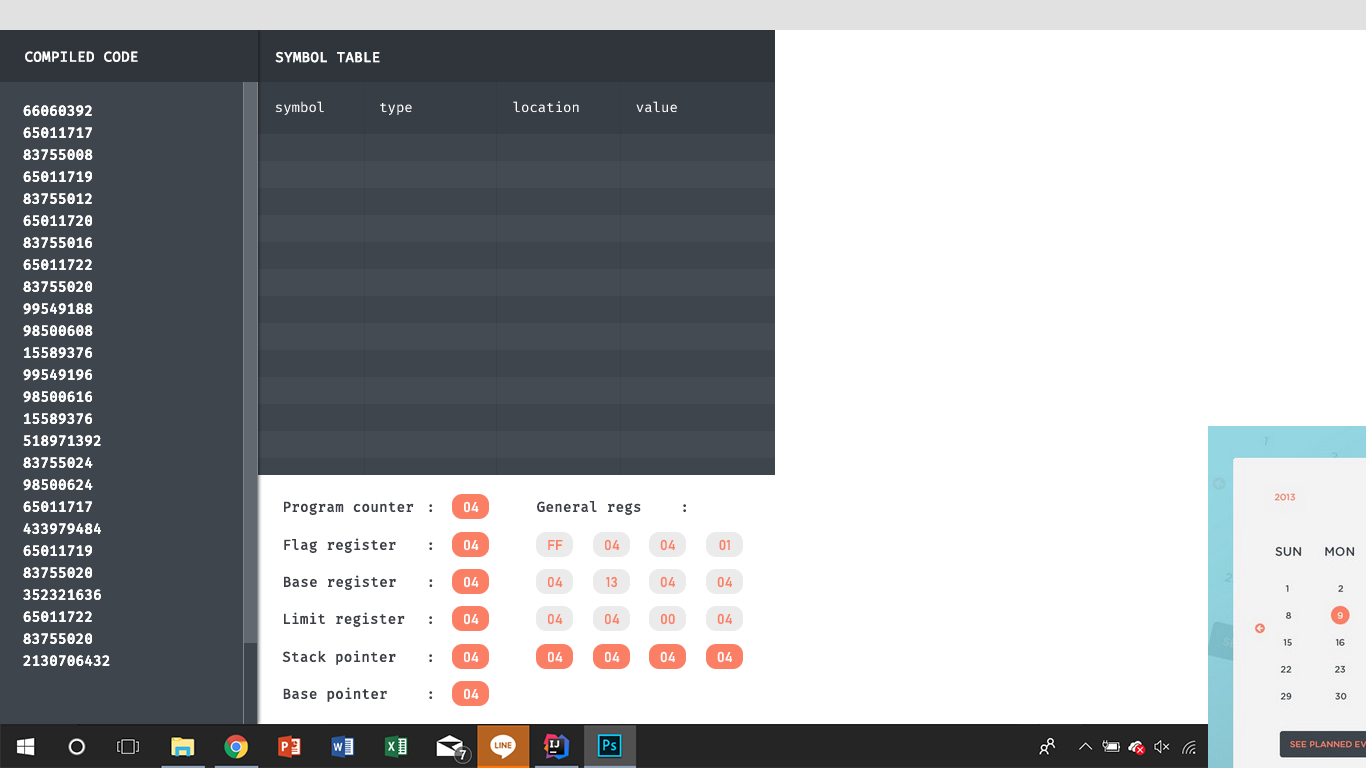
<style>
.page{position:relative;width:1366px;height:768px;background:#ffffff}
.page>*{position:absolute;margin:0}
.t1{font:14px "FiraMono-Regular";color:#ffffff;font-weight:bold}
.t2{font:14px "FiraMono-Regular";color:#fbfbfb}
.t3{font:14px "FiraMono-Regular";color:#383e45}
.t4{font:14px/22px "FiraMono-Regular";color:#ffffff;font-weight:bold}
.t5{font:14px "FiraMono-Regular";color:#3c3f46;font-weight:bold}
.t6{font:14px "Bahnschrift";color:#ffffff;font-weight:bold}
.t7{font:14px "Bahnschrift";color:#fb7f65;font-weight:bold}
.t8{font:14px "Bahnschrift";color:#fbfbfb;font-weight:bold}
</style>
<div class="page">
<p class="t1" style="left:25px;top:51px;width:113px;height:11px">COMPILED CODE</p>
<p class="t1" style="left:275px;top:51px;width:105px;height:12px">SYMBOL TABLE</p>
<p class="t2" style="left:275px;top:101px;width:49px;height:14px">symbol</p>
<p class="t2" style="left:380px;top:101px;width:40px;height:14px">type<span class="t3">l</span></p>
<p class="t2" style="left:513px;top:101px;width:75px;height:14px">location<span class="t3">y</span></p>
<p class="t2" style="left:636px;top:101px;width:50px;height:14px">value<span class="t3">y</span></p>
<p class="t4" style="left:23px;top:105px;width:87px;height:561px">66060392<br>65011717<br>83755008<br>65011719<br>83755012<br>65011720<br>83755016<br>65011722<br>83755020<br>99549188<br>98500608<br>15589376<br>99549196<br>98500616<br>15589376<br>518971392<br>83755024<br>98500624<br>65011717<br>433979484<br>65011719<br>83755020<br>352321636<br>65011722<br>83755020<br>2130706432</p>
<p class="t4" style="left:23px;top:105px;width:87px;height:561px">66060392<br>65011717<br>83755008<br>65011719<br>83755012<br>65011720<br>83755016<br>65011722<br>83755020<br>99549188<br>98500608<br>15589376<br>99549196<br>98500616<br>15589376<br>518971392<br>83755024<br>98500624<br>65011717<br>433979484<br>65011719<br>83755020<br>352321636<br>65011722<br>83755020<br>2130706432</p>
<p class="t5" style="left:284px;top:501px;width:149px;height:14px">Program counter :</p>
<p class="t6" style="left:464px;top:501px;width:15px;height:12px">04</p>
<p class="t5" style="left:537px;top:501px;width:149px;height:14px">General regs  :</p>
<p class="t5" style="left:284px;top:538px;width:149px;height:15px">Flag register :</p>
<p class="t6" style="left:464px;top:539px;width:15px;height:12px">04</p>
<p class="t7" style="left:548px;top:540px;width:15px;height:10px">FF</p>
<p class="t7" style="left:605px;top:539px;width:15px;height:12px">04</p>
<p class="t7" style="left:660px;top:539px;width:15px;height:12px">04</p>
<p class="t7" style="left:719px;top:539px;width:11px;height:12px">01</p>
<p class="t5" style="left:284px;top:575px;width:149px;height:15px">Base register :</p>
<p class="t6" style="left:464px;top:576px;width:15px;height:12px">04</p>
<p class="t7" style="left:548px;top:576px;width:15px;height:12px">04</p>
<p class="t7" style="left:606px;top:576px;width:11px;height:12px">13</p>
<p class="t7" style="left:660px;top:576px;width:15px;height:12px">04</p>
<p class="t7" style="left:717px;top:576px;width:15px;height:12px">04</p>
<p class="t5" style="left:284px;top:612px;width:148px;height:15px">Limit register :</p>
<p class="t6" style="left:464px;top:613px;width:15px;height:12px">04</p>
<p class="t7" style="left:548px;top:613px;width:15px;height:12px">04</p>
<p class="t7" style="left:605px;top:613px;width:15px;height:12px">04</p>
<p class="t7" style="left:661px;top:613px;width:14px;height:12px">00</p>
<p class="t7" style="left:717px;top:613px;width:15px;height:12px">04</p>
<p class="t5" style="left:282px;top:650px;width:150px;height:15px">Stack pointer :</p>
<p class="t6" style="left:464px;top:651px;width:15px;height:12px">04</p>
<p class="t8" style="left:548px;top:651px;width:15px;height:12px">04</p>
<p class="t8" style="left:605px;top:651px;width:15px;height:12px">04</p>
<p class="t8" style="left:660px;top:651px;width:15px;height:12px">04</p>
<p class="t8" style="left:717px;top:651px;width:15px;height:12px">04</p>
<p class="t5" style="left:283px;top:687px;width:150px;height:15px">Base pointer  :</p>
<p class="t6" style="left:464px;top:688px;width:15px;height:12px">04</p>
</div>
